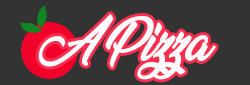
<style>
.page{position:relative;width:250px;height:85px;background:#333333}
.page>*{position:absolute;margin:0}
.t1{font:42.8px "VeganStylePersonalUse";color:#fcfcfc}
</style>
<div class="page">
<p class="t1" style="left:38px;top:14px;width:178px;height:66px">A Pizza</p>
</div>
